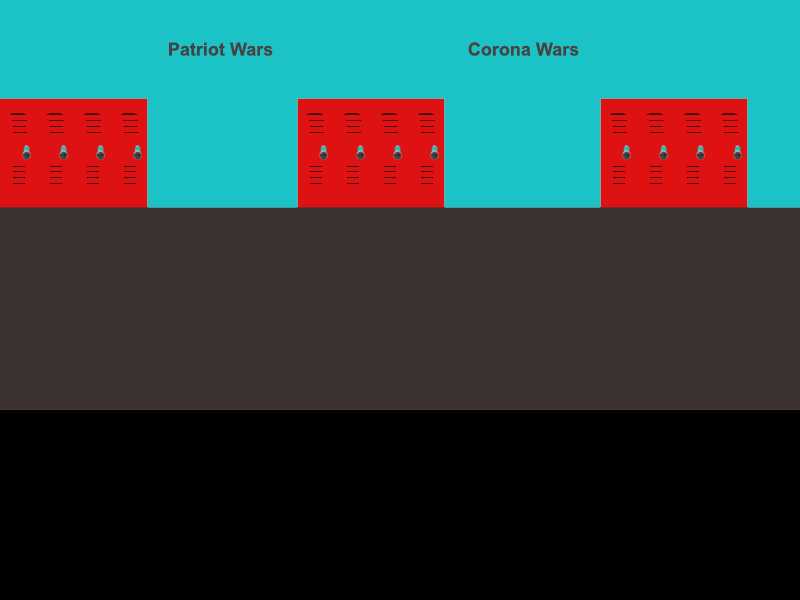
<style>
.page{position:relative;width:800px;height:600px;background:#3b3131}
.page>*{position:absolute;margin:0}
.t1{font:18px "Arial-BoldMT";color:#444444}
</style>
<div class="page">
<p class="t1" style="left:169px;top:42px;width:104px;height:14px">Patriot Wars</p>
<p class="t1" style="left:468px;top:42px;width:111px;height:14px">Corona Wars</p>
</div>
